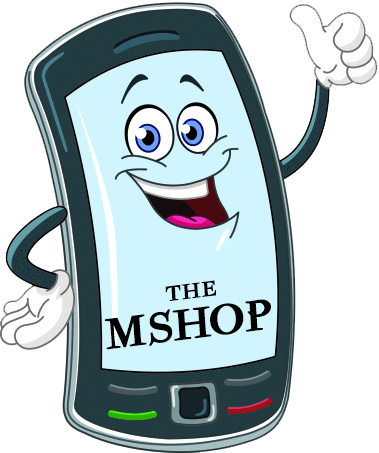
<style>
.page{position:relative;width:379px;height:453px;background:#ffffff}
.page>*{position:absolute;margin:0}
.t1{font:49px/39.8px "ParmaPetit-Normal";color:#000000;font-weight:bold;scale:1.14 1}
.t2{font:49px "ParmaPetit-Normal";color:#000000;font-weight:bold;scale:1.14 1}
.t3{font:23.9px/39.8px "ParmaPetit-Normal";color:#000000;font-weight:bold;scale:1.14 1}
</style>
<div class="page">
<p class="t1" style="left:104px;top:280px;width:167px;height:70px;rotate:-7deg"><span class="t2">    </span><span class="t3">THE<br></span>MSHOP</p>
</div>
